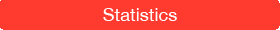
<style>
.page{position:relative;width:280px;height:30px;background:#ff3b30}
.page>*{position:absolute;margin:0}
.t1{font:18.1px "HelveticaNeue";color:#ffffff}
</style>
<div class="page">
<p class="t1" style="left:103px;top:8px;width:74px;height:13px">Statistics</p>
</div>
